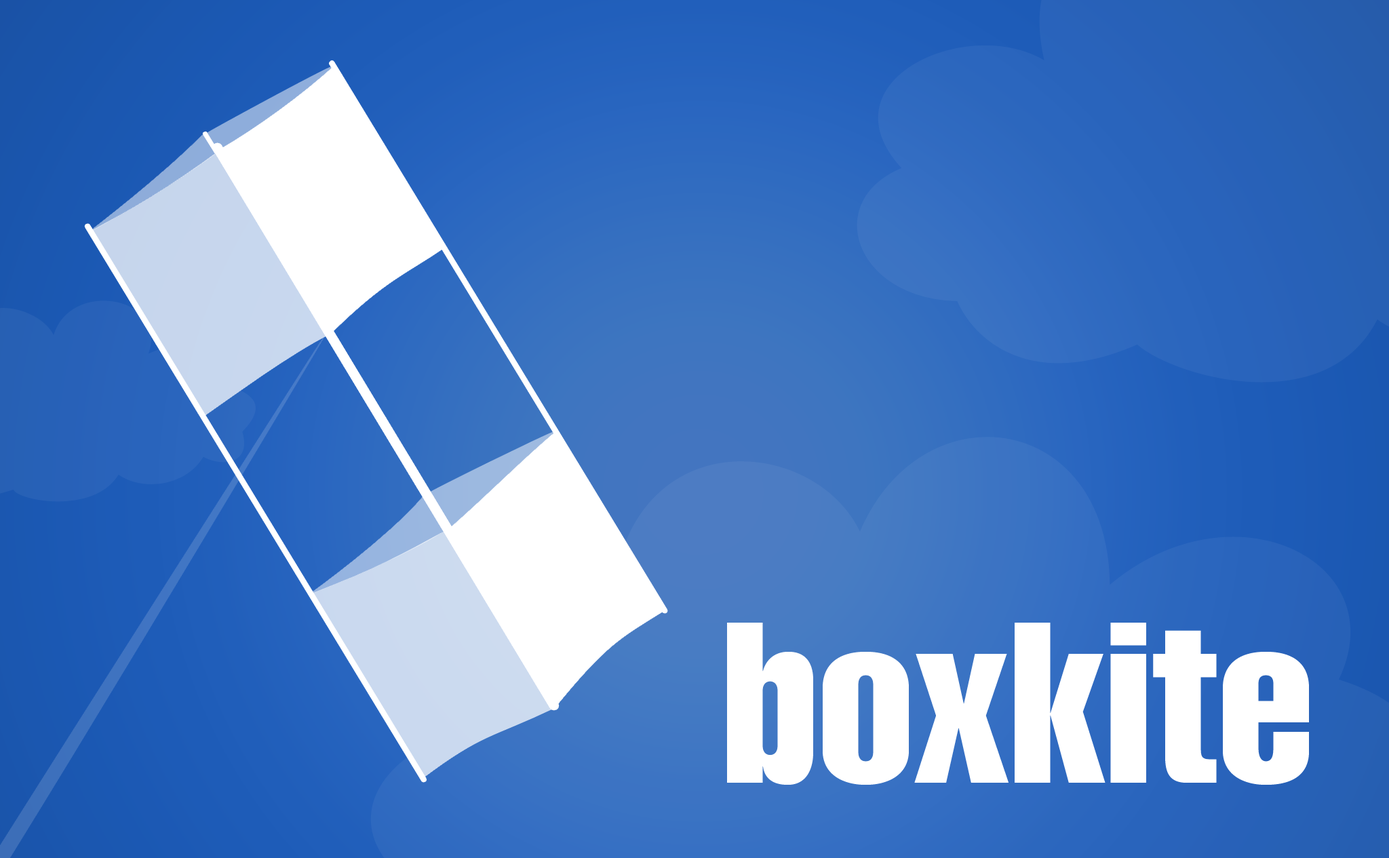
<style>
.page{position:relative;width:1389px;height:858px}
.page>*{position:absolute;margin:0}
.t1{font:224.9px "HelveticaLTStd-Comp";color:#ffffff}
</style>
<div class="page">
<p class="t1" style="left:727px;top:623px;width:582px;height:162px">boxkite</p>
</div>
